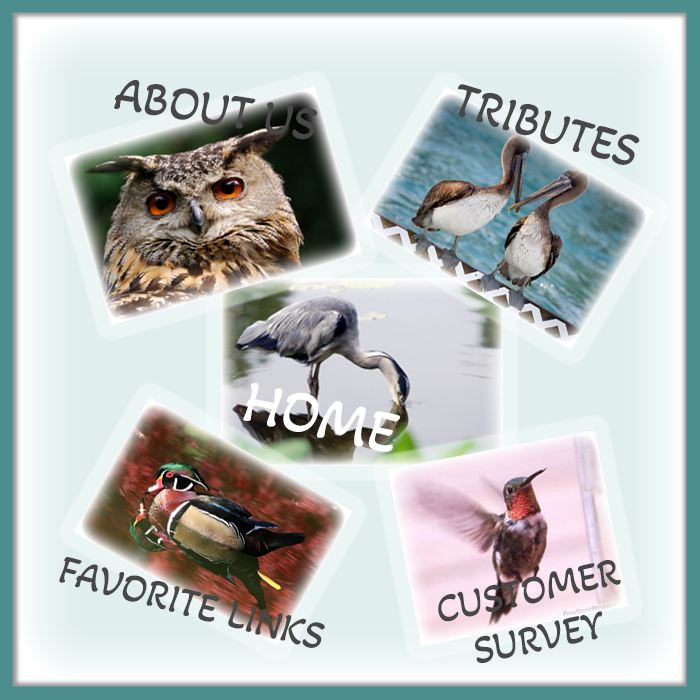
<style>
.page{position:relative;width:700px;height:700px}
.page>*{position:absolute;margin:0}
.t1{font:48.3px "AkayaKanadaka-Regular";color:#474747;text-transform:uppercase}
.t2{font:60.3px "AkayaKanadaka-Regular";color:#ffffff;text-transform:uppercase}
.t3{font:40.2px "AkayaKanadaka-Regular";color:#474747;text-transform:uppercase}
</style>
<div class="page">
<p class="t1" style="left:114px;top:80px;width:204px;height:60px;rotate:9deg">About Us</p>
<p class="t1" style="left:458px;top:84px;width:182px;height:81px;rotate:17deg">Tributes</p>
<p class="t2" style="left:243px;top:383px;width:157px;height:69px;rotate:13deg">Home</p>
<p class="t3" style="left:59px;top:557px;width:266px;height:91px;rotate:15deg">Favorite Links</p>
<p class="t3" style="left:438px;top:560px;width:183px;height:103px;rotate:-12deg">Customer Survey</p>
</div>
